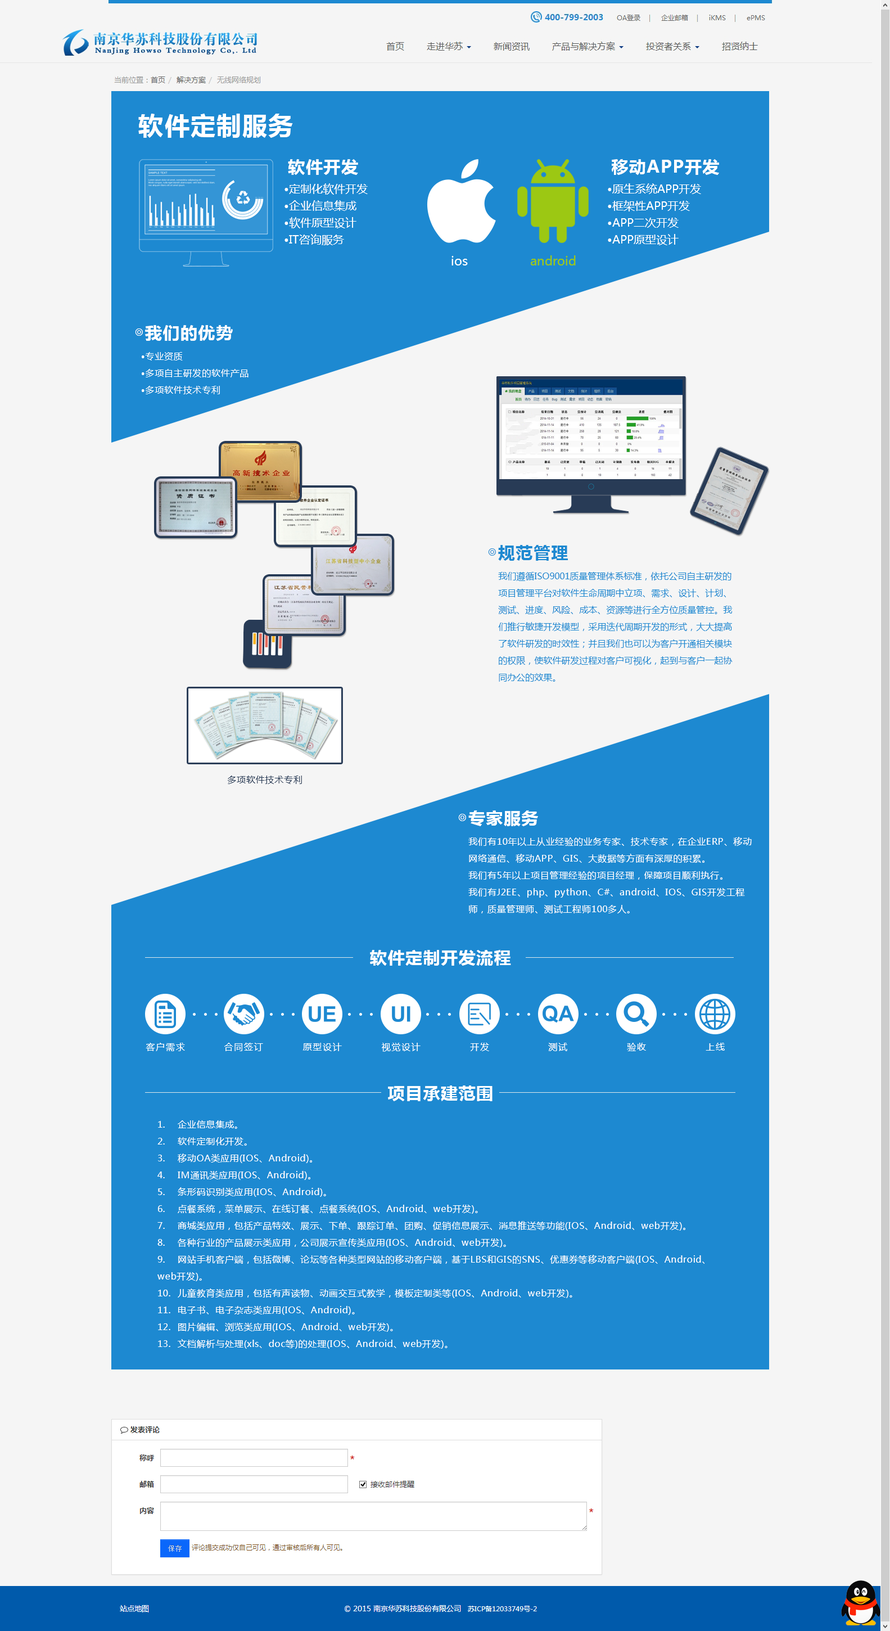
<style>
.page{position:relative;width:890px;height:1631px;background:#f5f5f5}
.page>*{position:absolute;margin:0}
.t1{font:24.8px "MicrosoftYaHei-Bold";letter-spacing:0.05em;color:#ffffff}
.t2{font:16.9px "MicrosoftYaHei-Bold";letter-spacing:0.05em;color:#ffffff}
.t3{font:11.2px/16.9px "MicrosoftYaHei";color:#ffffff}
.t4{font:11.2px/16.9px "MicrosoftYaHei-Bold";color:#ffffff}
.t5{font:12.4px "MicrosoftYaHei";color:#ffffff}
.t6{font:12.4px "MicrosoftYaHei";color:#9cc813}
.t7{font:9px/16.9px "MicrosoftYaHei";letter-spacing:0.05em;color:#ffffff}
.t8{font:9px/16.9px "MicrosoftYaHei-Bold";letter-spacing:0.05em;color:#ffffff}
.t9{font:16.9px "MicrosoftYaHei-Bold";letter-spacing:0.05em;color:#1d89d1}
.t10{font:9px/16.9px "MicrosoftYaHei";color:#1d89d1}
.t11{font:9px "MicrosoftYaHei";letter-spacing:0.05em;color:#283b56}
.t12{font:9px "MicrosoftYaHei";letter-spacing:0.1em;color:#ffffff}
</style>
<div class="page">
<p class="t1" style="left:138px;top:114px;width:155px;height:24px">软件定制服务</p>
<p class="t2" style="left:288px;top:159px;width:70px;height:16px">软件开发</p>
<p class="t2" style="left:611px;top:159px;width:108px;height:17px">移动APP开发</p>
<p class="t3" style="left:285px;top:183px;width:83px;height:62px"><span class="t4">·</span>定制化软件开发<br><span class="t4">·</span>企业信息集成 <br><span class="t4">·</span>软件原型设计<br><span class="t4">·</span>IT咨询服务</p>
<p class="t3" style="left:608px;top:183px;width:93px;height:62px"><span class="t4">·</span>原生系统APP开发<br><span class="t4">·</span>框架性APP开发 <br><span class="t4">·</span>APP二次开发 <br><span class="t4">·</span>APP原型设计</p>
<p class="t5" style="left:452px;top:256px;width:16px;height:10px">ios</p>
<p class="t6" style="left:531px;top:255px;width:45px;height:11px">android</p>
<p class="t2" style="left:135px;top:325px;width:98px;height:16px">◎我们的优势</p>
<p class="t7" style="left:142px;top:352px;width:107px;height:42px"><span class="t8">·</span>专业资质<br><span class="t8">·</span>多项自主研发的软件产品<br><span class="t8">·</span>多项软件技术专利</p>
<p class="t9" style="left:488px;top:545px;width:80px;height:16px">◎规范管理</p>
<p class="t10" style="left:498px;top:572px;width:235px;height:110px">我们遵循ISO9001质量管理体系标准，依托公司自主研发的项目管理平台对软件生命周期中立项、需求、设计、计划、测试、进度、风险、成本、资源等进行全方位质量管控。我们推行敏捷开发模型，采用迭代周期开发的形式，大大提高了软件研发的时效性；并且我们也可以为客户开通相关模块的权限，使软件研发过程对客户可视化，起到与客户一起协同办公的效果。</p>
<p class="t11" style="left:228px;top:776px;width:74px;height:8px">多项软件技术专利</p>
<p class="t2" style="left:458px;top:811px;width:80px;height:15px">◎专家服务</p>
<p class="t7" style="left:469px;top:837px;width:283px;height:77px">我们有10年以上从业经验的业务专家、技术专家，在企业ERP、移动网络通信、移动APP、GIS、大数据等方面有深厚的积累。<br>我们有5年以上项目管理经验的项目经理，保障项目顺利执行。<br>我们有J2EE、php、python、C#、android、IOS、GIS开发工程师，质量管理师、测试工程师100多人。</p>
<p class="t2" style="left:370px;top:950px;width:141px;height:16px">软件定制开发流程</p>
<p class="t12" style="left:146px;top:1043px;width:39px;height:8px">客户需求</p>
<p class="t12" style="left:224px;top:1043px;width:39px;height:8px">合同签订</p>
<p class="t12" style="left:303px;top:1043px;width:39px;height:8px">原型设计</p>
<p class="t12" style="left:382px;top:1043px;width:39px;height:9px">视觉设计</p>
<p class="t12" style="left:470px;top:1043px;width:19px;height:8px">开发</p>
<p class="t12" style="left:548px;top:1043px;width:20px;height:8px">测试</p>
<p class="t12" style="left:627px;top:1043px;width:19px;height:8px">验收</p>
<p class="t12" style="left:706px;top:1043px;width:19px;height:8px">上线</p>
<p class="t2" style="left:388px;top:1086px;width:105px;height:15px">项目承建范围</p>
<p class="t7" style="left:158px;top:1120px;width:547px;height:229px">1. 企业信息集成。<br>2. 软件定制化开发。<br>3. 移动OA类应用(IOS、Android)。<br>4. IM通讯类应用(IOS、Android)。<br>5. 条形码识别类应用(IOS、Android)。<br>6. 点餐系统，菜单展示、在线订餐、点餐系统(IOS、Android、web开发)。<br>7. 商城类应用，包括产品特效、展示、下单、跟踪订单、团购、促销信息展示、消息推送等功能(IOS、Android、web开发)。<br>8. 各种行业的产品展示类应用，公司展示宣传类应用(IOS、Android、web开发)。<br>9. 网站手机客户端，包括微博、论坛等各种类型网站的移动客户端，基于LBS和GIS的SNS、优惠券等移动客户端(IOS、Android、web开发)。<br>10. 儿童教育类应用，包括有声读物、动画交互式教学，模板定制类等(IOS、Android、web开发)。<br>11. 电子书、电子杂志类应用(IOS、Android)。<br>12. 图片编辑、浏览类应用(IOS、Android、web开发)。<br>13. 文档解析与处理(xls、doc等)的处理(IOS、Android、web开发)。</p>
</div>
